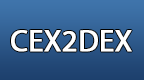
<style>
.page{position:relative;width:144px;height:80px}
.page>*{position:absolute;margin:0}
.t1{font:30px "MyriadPro-Regular";color:#ffffff;font-weight:bold}
</style>
<div class="page">
<p class="t1" style="left:11px;top:30px;width:121px;height:22px">CEX2DEX</p>
</div>
